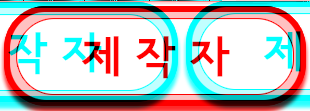
<style>
.page{position:relative;width:310px;height:111px;background:#ffffff}
.page>*{position:absolute;margin:0}
.t1{font:44.1px "SeoulNamsanEB"}
</style>
<div class="page">
<p class="t1" style="left:82px;top:31px;width:148px;height:43px">제 작 자</p>
</div>
